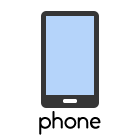
<style>
.page{position:relative;width:140px;height:140px;background:#ffffff}
.page>*{position:absolute;margin:0}
.t1{font:24px "Nova";color:#000000}
</style>
<div class="page">
<p class="t1" style="left:39px;top:111px;width:62px;height:24px">phone</p>
</div>
